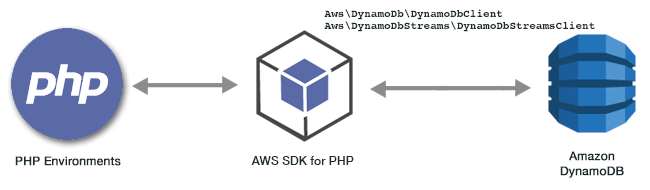
<style>
.page{position:relative;width:650px;height:190px;background:#ffffff}
.page>*{position:absolute;margin:0}
.t1{font:11px/12.1px "Courier-Bold";color:#1d2a2e}
.t2{font:12px "HelveticaNeue";color:#1d2a2e;font-weight:bold}
.t3{font:12.1px "HelveticaNeue-Medium";color:#1d2a2e}
</style>
<div class="page">
<p class="t1" style="left:324px;top:9px;width:271px;height:23px">Aws\DynamoDb\DynamoDbClient<br>Aws\DynamoDbStreams\DynamoDbStreamsClient</p>
<p class="t2" style="left:15px;top:156px;width:106px;height:10px">PHP Environments</p>
<p class="t3" style="left:251px;top:156px;width:103px;height:9px">AWS SDK for PHP</p>
<p class="t2" style="left:560px;top:151px;width:64px;height:27px;text-align:center">Amazon<br>DynamoDB</p>
</div>
